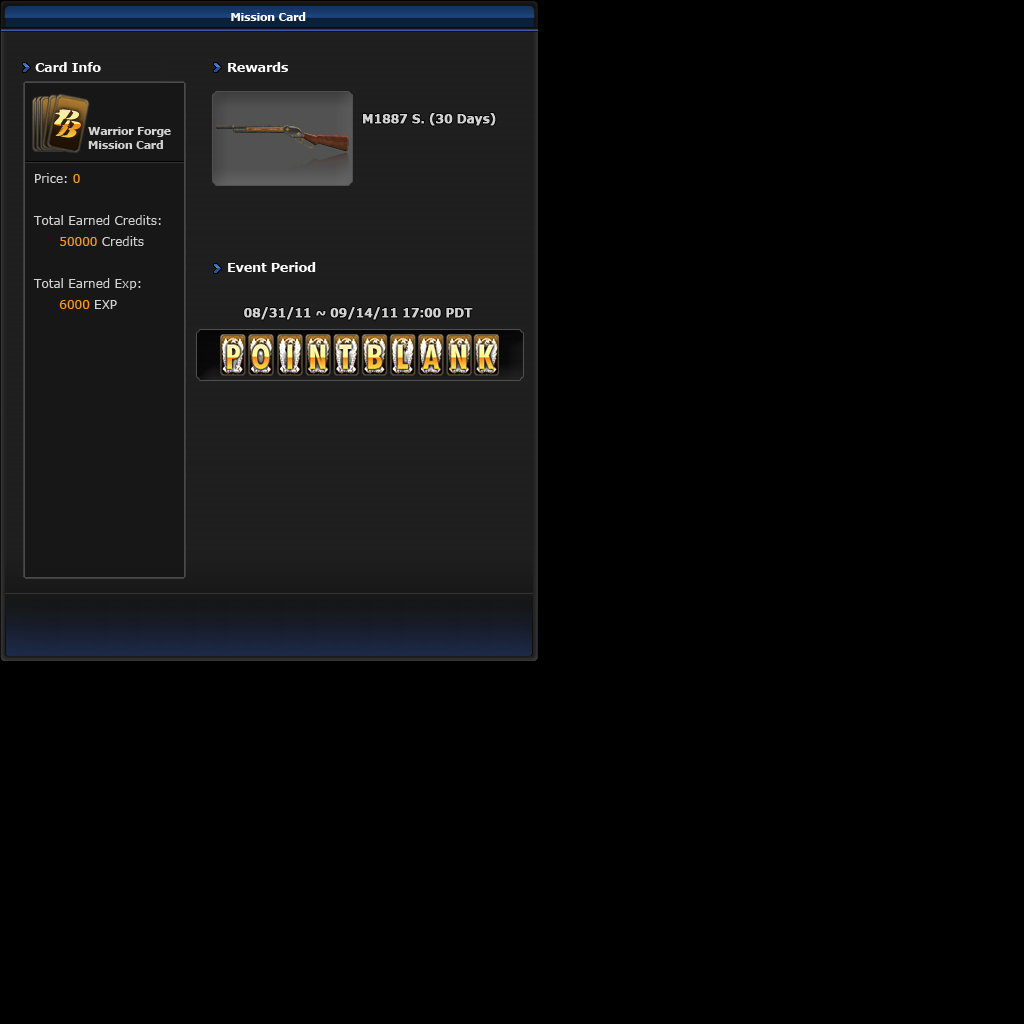
<style>
.page{position:relative;width:1024px;height:1024px;background:#000000}
.page>*{position:absolute;margin:0}
.t1{font:11px "Verdana-Bold";letter-spacing:-0.025em;color:#ffffff}
.t2{font:13px "Verdana-Bold";letter-spacing:-0.025em;color:#ffffff}
.t3{font:12px "Verdana-Bold";letter-spacing:-0.025em;color:#d2d2d2;font-weight:bold}
.t4{font:11px/14px "Verdana-Bold";letter-spacing:-0.025em;color:#d2d2d2}
.t5{font:12px "Verdana";color:#d2d2d2}
.t6{font:12px "Verdana";color:#ff9900}
</style>
<div class="page">
<p class="t1" style="left:231px;top:12px;width:75px;height:9px">Mission Card</p>
<p class="t2" style="left:35px;top:62px;width:66px;height:10px">Card Info</p>
<p class="t2" style="left:228px;top:62px;width:60px;height:10px">Rewards</p>
<p class="t3" style="left:363px;top:113px;width:133px;height:13px">M1887 S. (30 Days)</p>
<p class="t4" style="left:88px;top:127px;width:83px;height:22px">Warrior Forge <br>Mission Card</p>
<p class="t5" style="left:33px;top:173px;width:128px;height:136px">Price: <span class="t6">0<br><br></span>Total Earned Credits: <br><span class="t6">      50000 </span>Credits<br><br>Total Earned Exp:<br>      <span class="t6">6000</span> EXP</p>
<p class="t2" style="left:228px;top:262px;width:88px;height:10px">Event Period</p>
<p class="t3" style="left:244px;top:307px;width:229px;height:13px">08/31/11 ~ 09/14/11 17:00 PDT</p>
</div>
